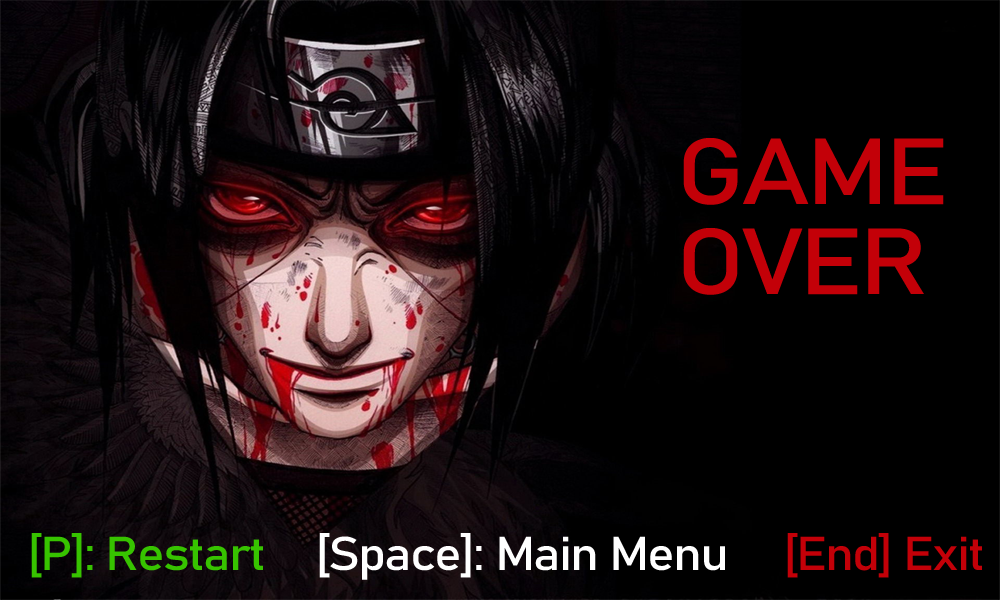
<style>
.page{position:relative;width:1000px;height:600px;background:#000000}
.page>*{position:absolute;margin:0}
.t1{font:92.3px "Bahnschrift";letter-spacing:-0.04em;color:#c30008;scale:1.16 1}
.t2{font:46.8px "Bahnschrift";letter-spacing:-0.04em;color:#ffffff;scale:1.11 1}
.t3{font:46.8px "Bahnschrift";letter-spacing:-0.04em;color:#37c300;scale:1.11 1}
.t4{font:46.8px "Bahnschrift";letter-spacing:-0.04em;color:#c30008;scale:1.11 1}
</style>
<div class="page">
<p class="t1" style="left:683px;top:138px;width:261px;height:157px">GAME<br>OVER</p>
<p class="t2" style="left:31px;top:533px;width:951px;height:47px"><span class="t3">[P]: Restart   </span>[Space]: Main Menu<span class="t4">  [End] Exit</span></p>
</div>
